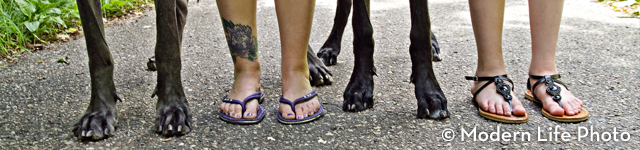
<style>
.page{position:relative;width:640px;height:150px}
.page>*{position:absolute;margin:0}
.t1{font:21.4px "NeutrafaceText-Demi";color:#ffffff}
.t2{font:24.1px "NeutrafaceText-Demi";color:#ffffff}
</style>
<div class="page">
<p class="t1" style="left:441px;top:125px;width:190px;height:17px"><span class="t2">© </span>Modern Life Photo</p>
</div>
